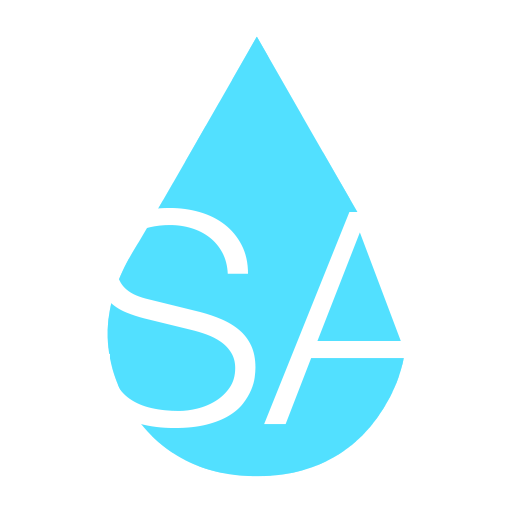
<style>
.page{position:relative;width:512px;height:512px;background:#ffffff}
.page>*{position:absolute;margin:0}
.t1{font:296.6px "HelveticaNeue-Light";color:#ffffff}
</style>
<div class="page">
<p class="t1" style="left:89px;top:208px;width:367px;height:220px">SA</p>
</div>
